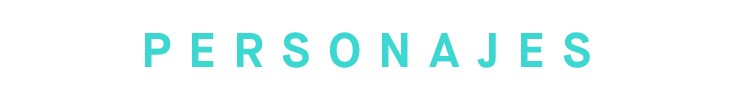
<style>
.page{position:relative;width:732px;height:96px;background:#ffffff}
.page>*{position:absolute;margin:0}
.t1{font:48.4px "MaisonNeue-Bold";letter-spacing:0.36em;color:#3dd7d2}
</style>
<div class="page">
<p class="t1" style="left:145px;top:32px;width:445px;height:36px">PERSONAJES</p>
</div>
